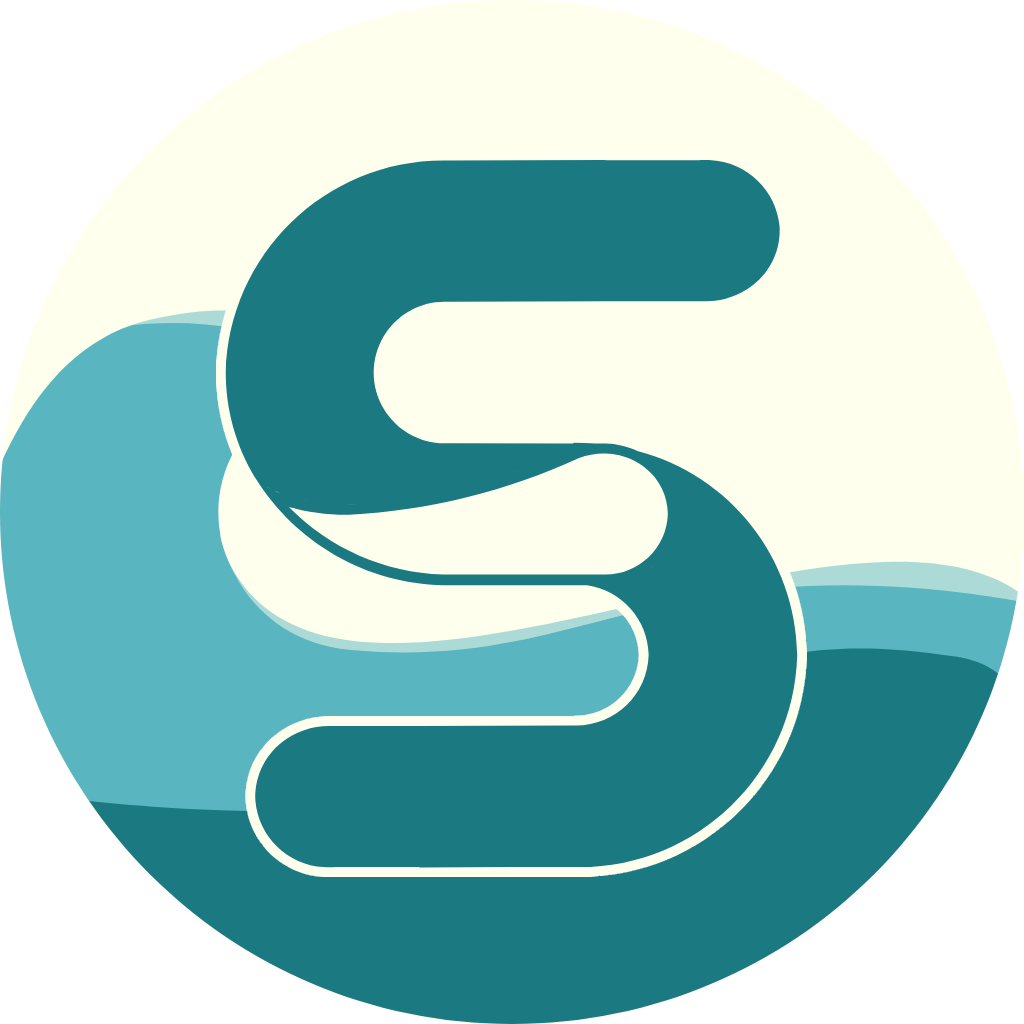
<style>
.page{position:relative;width:1024px;height:1024px;background:#ffffed}
.page>*{position:absolute;margin:0}
.t1{font:1047.1px "AquaphonicDamp";color:#1b7981}
</style>
<div class="page">
<p class="t1" style="left:225px;top:160px;width:573px;height:708px">S</p>
</div>
